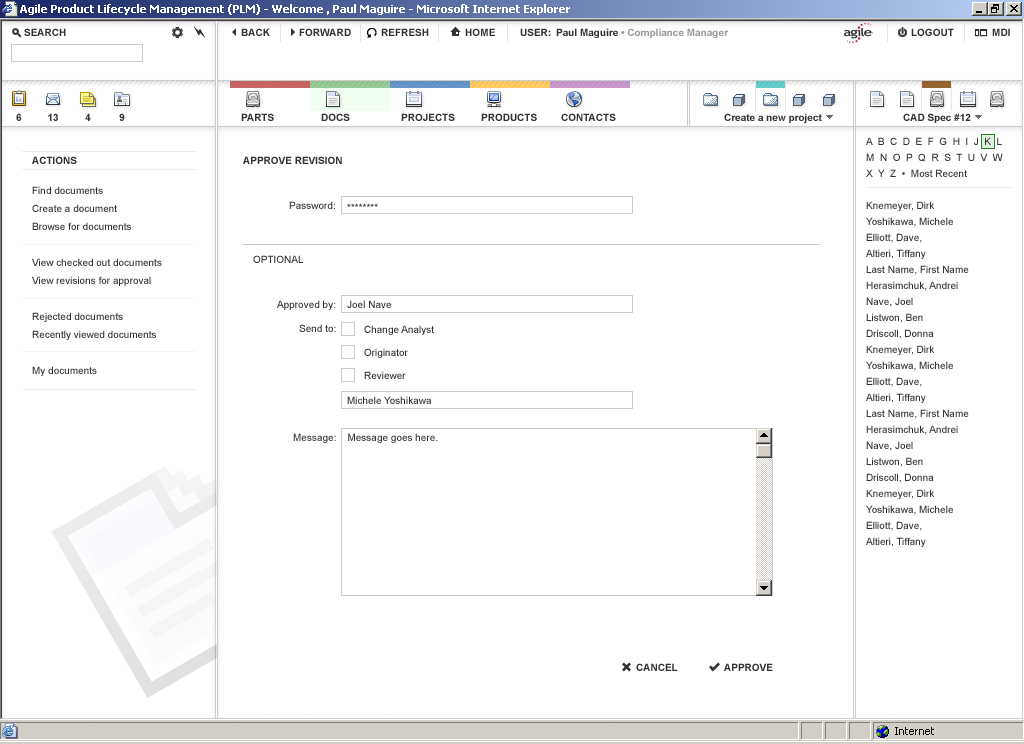
<style>
.page{position:relative;width:1024px;height:744px;background:#ffffff}
.page>*{position:absolute;margin:0}
.t1{font:10px/16px "ArialMT";color:#333333}
.t2{font:10px "Arial-BoldMT";color:#333333}
.t3{font:10px/18px "ArialMT";color:#333333}
.t4{font:10px "ArialMT";color:#333333}
.t5{font:10px "ArialMT"}
</style>
<div class="page">
<p class="t1" style="left:866px;top:137px;width:137px;height:410px">A  B  C  D  E  F  G  H  I  J  K  L<br>M  N  O  P  Q  R  S  T  U  V  W <br>X  Y  Z  •  Most Recent<br><br>Knemeyer, Dirk<br>Yoshikawa, Michele<br>Elliott, Dave,<br>Altieri, Tiffany<br>Last Name, First Name<br>Herasimchuk, Andrei<br>Nave, Joel<br>Listwon, Ben<br>Driscoll, Donna<br>Knemeyer, Dirk<br>Yoshikawa, Michele<br>Elliott, Dave,<br>Altieri, Tiffany<br>Last Name, First Name<br>Herasimchuk, Andrei<br>Nave, Joel<br>Listwon, Ben<br>Driscoll, Donna<br>Knemeyer, Dirk<br>Yoshikawa, Michele<br>Elliott, Dave,<br>Altieri, Tiffany</p>
<p class="t2" style="left:32px;top:156px;width:45px;height:8px">ACTIONS</p>
<p class="t2" style="left:243px;top:156px;width:99px;height:8px">APPROVE REVISION</p>
<p class="t3" style="left:32px;top:186px;width:130px;height:190px">Find documents<br>Create a document<br>Browse for documents<br><br>View checked out documents<br>View revisions for approval<br><br>Rejected documents<br>Recently viewed documents<br><br>My documents</p>
<p class="t4" style="left:289px;top:201px;width:46px;height:8px">Password:</p>
<p class="t5" style="left:347px;top:203px;width:31px;height:4px">********</p>
<p class="t4" style="left:253px;top:255px;width:51px;height:8px">OPTIONAL</p>
<p class="t4" style="left:277px;top:300px;width:114px;height:10px">Approved by:    Joel Nave</p>
<p class="t4" style="left:299px;top:324px;width:37px;height:8px">Send to:</p>
<p class="t4" style="left:364px;top:325px;width:70px;height:10px">Change Analyst</p>
<p class="t4" style="left:364px;top:348px;width:44px;height:10px">Originator</p>
<p class="t4" style="left:364px;top:371px;width:42px;height:8px">Reviewer</p>
<p class="t4" style="left:347px;top:396px;width:84px;height:8px">Michele Yoshikawa</p>
<p class="t4" style="left:293px;top:433px;width:145px;height:10px">Message:    Message goes here.</p>
<p class="t2" style="left:636px;top:663px;width:42px;height:8px">CANCEL</p>
<p class="t2" style="left:724px;top:663px;width:49px;height:8px">APPROVE</p>
</div>
